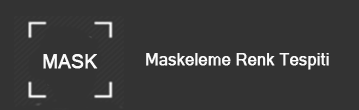
<style>
.page{position:relative;width:359px;height:110px;background:#333333}
.page>*{position:absolute;margin:0}
.t1{font:18.7px "MicrosoftSansSerif";color:#fafafa;font-weight:bold}
.t2{font:16px "MicrosoftSansSerif";color:#fafafa;font-weight:bold}
</style>
<div class="page">
<p class="t1" style="left:43px;top:54px;width:55px;height:15px">MASK</p>
<p class="t2" style="left:146px;top:53px;width:183px;height:17px">Maskeleme Renk Tespiti</p>
</div>
